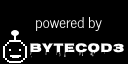
<style>
.page{position:relative;width:128px;height:64px;background:#000000}
.page>*{position:absolute;margin:0}
.t1{font:15px "NewsCycle";color:#ffffff}
.t2{font:13px "Nosifer-Regular";color:#ffffff}
</style>
<div class="page">
<p class="t1" style="left:36px;top:16px;width:66px;height:16px">powered by</p>
<p class="t2" style="left:30px;top:43px;width:94px;height:15px">bytecod3</p>
</div>
